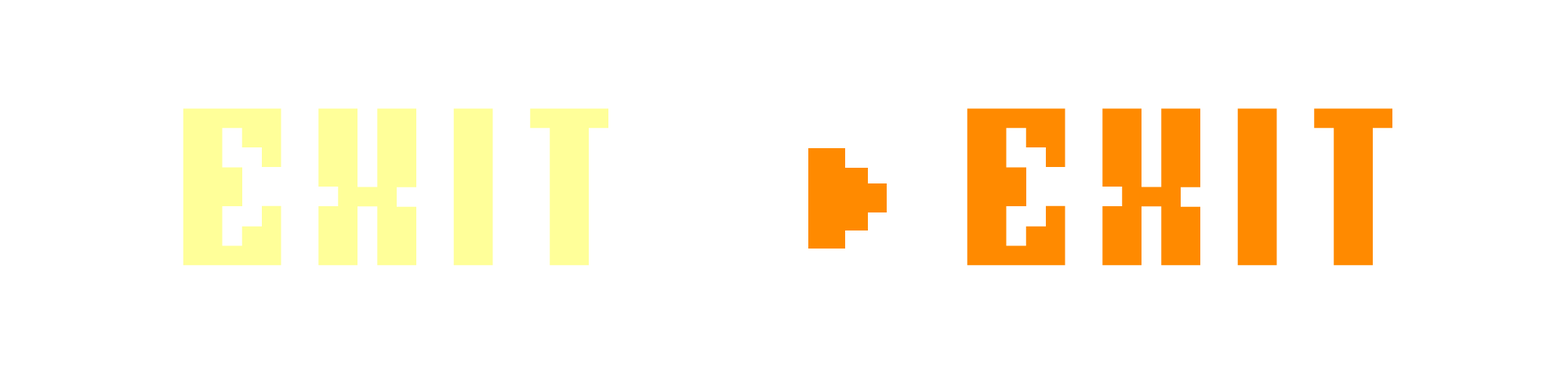
<style>
.page{position:relative;width:1568px;height:392px;background:#ffffff}
.page>*{position:absolute;margin:0}
.t1{font:235.2px "BMgermarA12";letter-spacing:0.075em;color:#ffff99}
.t2{font:235.2px "BMgermarA12";letter-spacing:0.075em;color:#ff8a00}
</style>
<div class="page">
<p class="t1" style="left:183px;top:108px;width:425px;height:158px">EXIT</p>
<p class="t2" style="left:967px;top:108px;width:425px;height:158px">EXIT</p>
</div>
